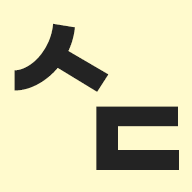
<style>
.page{position:relative;width:192px;height:192px;background:#fffacd}
.page>*{position:absolute;margin:0}
.t1{font:125px "GmarketSansTTFBold";color:#232323}
</style>
<div class="page">
<p class="t1" style="left:14px;top:23px;width:95px;height:69px">ㅅ</p>
<p class="t1" style="left:96px;top:106px;width:83px;height:64px">ㄷ</p>
</div>
